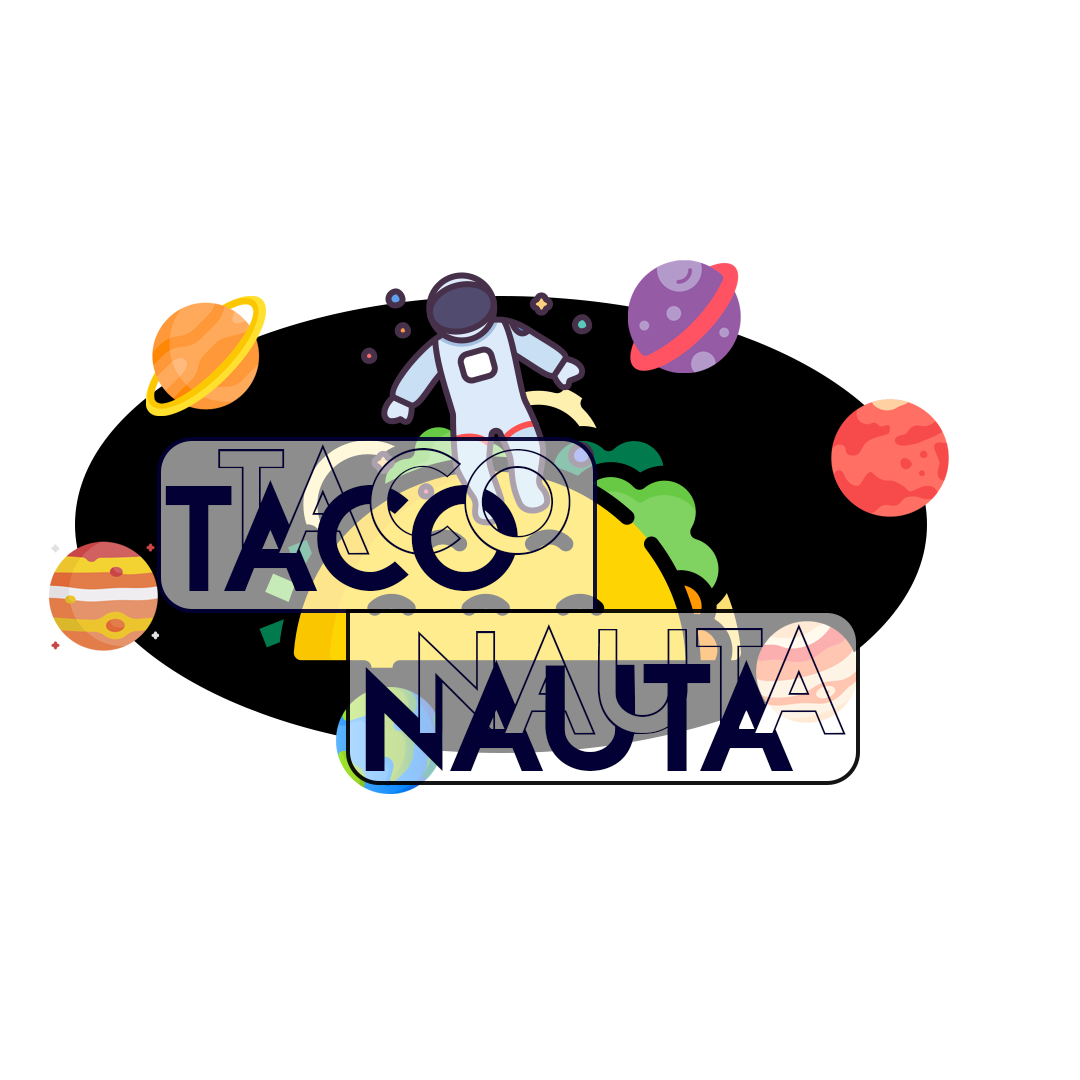
<style>
.page{position:relative;width:1080px;height:1080px;background:#ffffff}
.page>*{position:absolute;margin:0}
.t1{font:150px "Break-Regular";color:#020034}
</style>
<div class="page">
<p class="t1" style="left:165px;top:444px;width:681px;height:327px">Taco<br>     Nauta</p>
</div>
